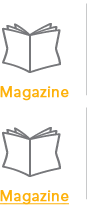
<style>
.page{position:relative;width:90px;height:208px;background:#ffffff}
.page>*{position:absolute;margin:0}
.t1{font:15px "Avenir-Book";letter-spacing:0.015em;color:#fdb10b;font-weight:bold}
</style>
<div class="page">
<p class="t1" style="left:0px;top:86px;width:69px;height:15px">Magazine</p>
<p class="t1" style="left:0px;top:190px;width:69px;height:15px">Magazine</p>
</div>
